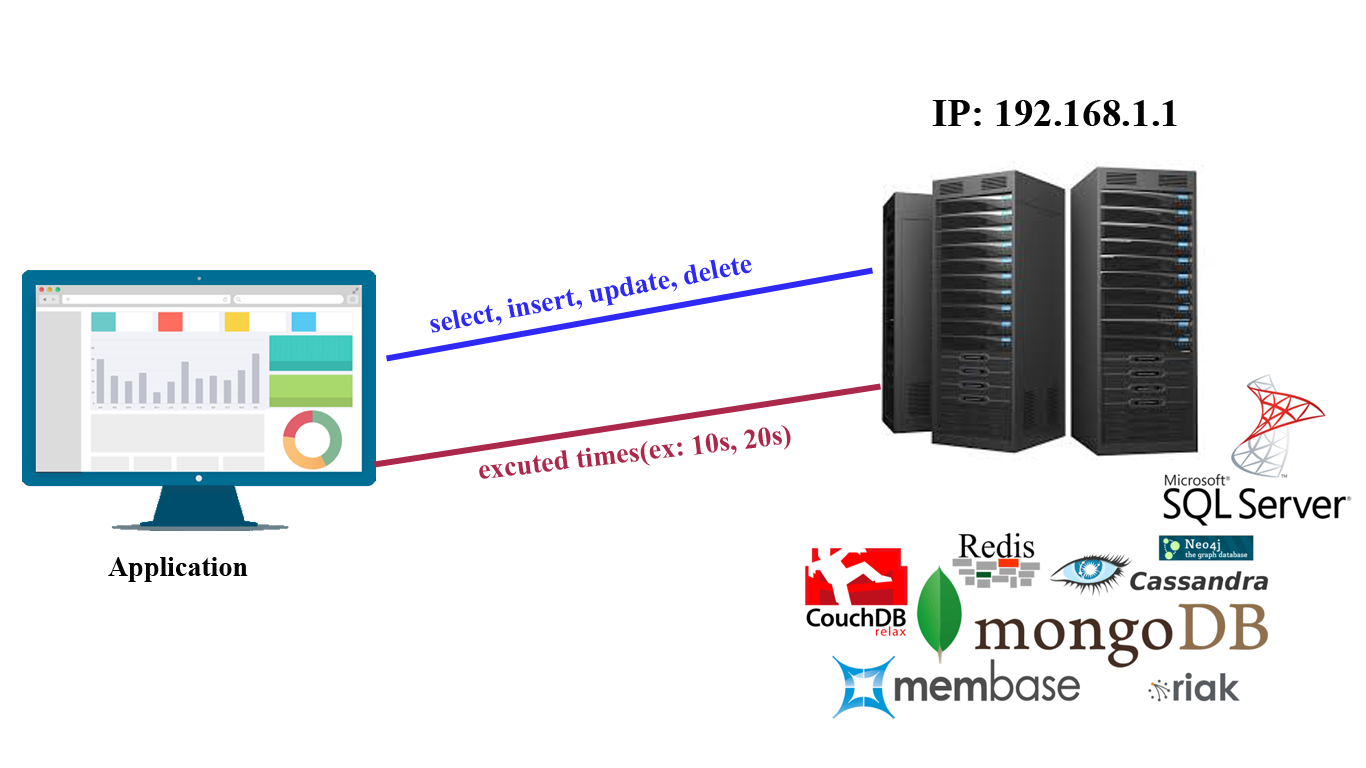
<style>
.page{position:relative;width:1366px;height:768px;background:#ffffff}
.page>*{position:absolute;margin:0}
.t1{font:39.1px "TimesNewRomanPS-BoldMT";color:#030303}
.t2{font:28px "TimesNewRomanPS-BoldMT";color:#2e29f6}
.t3{font:28px "TimesNewRomanPS-BoldMT";color:#ab284a}
.t4{font:28px "TimesNewRomanPS-BoldMT";color:#030303}
</style>
<div class="page">
<p class="t1" style="left:932px;top:100px;width:245px;height:26px">IP: 192.168.1.1</p>
<p class="t2" style="left:430px;top:257px;width:322px;height:76px;rotate:-11deg">select, insert, update, delete</p>
<p class="t3" style="left:479px;top:425px;width:312px;height:54px;rotate:-7deg">excuted times(ex: 10s, 20s)</p>
<p class="t4" style="left:108px;top:557px;width:140px;height:25px">Application</p>
</div>
